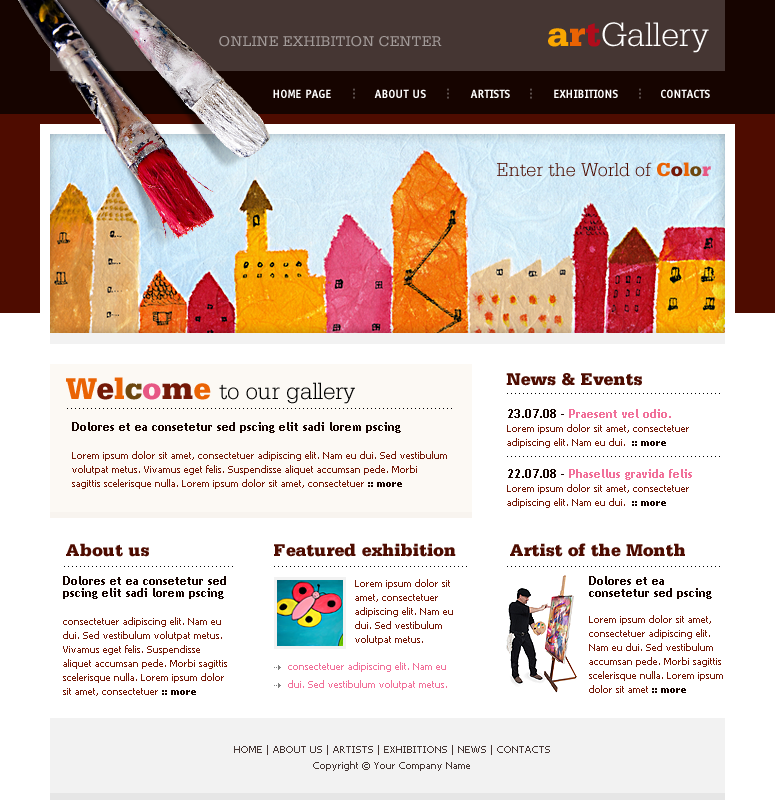
<style>
.page{position:relative;width:775px;height:800px;background:#ffffff}
.page>*{position:absolute;margin:0}
.t1{font:36px "SerifaStd-Light";color:#ffffff}
.t2{font:36px "SerifaStd-Black";color:#faa701}
.t3{font:36px "SerifaStd-Black";color:#ea6303}
.t4{font:36px "SerifaStd-Black";color:#b10c1b}
.t5{font:15px "SerifaStd-Roman";color:#a29b99;text-transform:uppercase}
.t6{font:12px "OffensiveBoldBold";color:#ffffff}
.t7{font:12px "OffensiveBoldBold";color:#5c504d}
.t8{font:19.9px "SerifaStd-Light";color:#4e0c00}
.t9{font:19.9px "SerifaStd-Black";color:#ea6303}
.t10{font:19.9px "SerifaStd-Black";color:#741907}
.t11{font:19.9px "SerifaStd-Black";color:#6d470f}
.t12{font:19.9px "SerifaStd-Black";color:#e75884}
.t13{font:24.7px "SerifaStd-Light";color:#000000}
.t14{font:31.7px "SerifaStd-Black";color:#ea6303}
.t15{font:31.7px "SerifaStd-Black";color:#741907}
.t16{font:31.7px "SerifaStd-Black";color:#6d470f}
.t17{font:31.7px "SerifaStd-Black";color:#e75884}
.t18{font:18px "SerifaStd-Black";color:#4e0c00}
.t19{font:10px "TrebuchetMS-Bold";color:#000000}
.t20{font:10px/14px "Tahoma";color:#741907}
.t21{font:12px/12px "TrebuchetMS-Bold";color:#160400}
.t22{font:12px/12px "TrebuchetMS-Bold";color:#f1719a}
.t23{font:10px/14px "Tahoma-Bold";color:#160400}
.t24{font:10px/18px "Tahoma";color:#f1719a}
.t25{font:10px/16px "Tahoma";color:#453633}
</style>
<div class="page">
<p class="t1" style="left:548px;top:22px;width:161px;height:31px"><span class="t2">a</span><span class="t3">r</span><span class="t4">t</span>Gallery</p>
<p class="t5" style="left:219px;top:36px;width:223px;height:11px">online exhibition center</p>
<p class="t6" style="left:273px;top:89px;width:58px;height:9px">HOME PAGE</p>
<p class="t7" style="left:353px;top:88px;width:2px;height:11px;rotate:90deg">...</p>
<p class="t6" style="left:374px;top:89px;width:52px;height:9px">ABOUT US</p>
<p class="t7" style="left:447px;top:88px;width:2px;height:11px;rotate:90deg">...</p>
<p class="t6" style="left:470px;top:89px;width:40px;height:9px">ARTISTS</p>
<p class="t7" style="left:530px;top:88px;width:2px;height:11px;rotate:90deg">...</p>
<p class="t6" style="left:554px;top:89px;width:64px;height:9px">EXHIBITIONS</p>
<p class="t7" style="left:639px;top:88px;width:2px;height:11px;rotate:90deg">...</p>
<p class="t6" style="left:661px;top:89px;width:49px;height:9px">CONTACTS</p>
<p class="t8" style="left:497px;top:162px;width:214px;height:15px">Enter the World of <span class="t9">C</span><span class="t10">o</span><span class="t9">l</span><span class="t11">o</span><span class="t12">r</span></p>
<p class="t13" style="left:66px;top:377px;width:289px;height:27px"><span class="t14">W</span><span class="t15">e</span><span class="t14">l</span><span class="t16">c</span><span class="t17">o</span><span class="t15">m</span><span class="t14">e </span>to our gallery</p>
<p class="t18" style="left:506px;top:373px;width:136px;height:13px">News &amp; Events</p>
<p class="t19" style="left:507px;top:393px;width:213px;height:1px">......................................................</p>
<p class="t19" style="left:67px;top:408px;width:385px;height:1px">.................................................................................................</p>
<p class="t20" style="left:507px;top:409px;width:182px;height:39px"><span class="t21">23.07.08 - </span><span class="t22">Praesent vel odio. <br></span>Lorem ipsum dolor sit amet, consectetuer adipiscing elit. Nam eu dui.  <span class="t23">:: more</span></p>
<p class="t20" style="left:72px;top:422px;width:375px;height:67px"><span class="t21">Dolores et ea consetetur sed pscing elit sadi lorem pscing <br></span><br>Lorem ipsum dolor sit amet, consectetuer adipiscing elit. Nam eu dui. Sed vestibulum volutpat metus. Vivamus eget felis. Suspendisse aliquet accumsan pede. Morbi sagittis scelerisque nulla. Lorem ipsum dolor sit amet, consectetuer <span class="t23">:: more</span></p>
<p class="t19" style="left:507px;top:456px;width:213px;height:1px">......................................................</p>
<p class="t20" style="left:507px;top:469px;width:185px;height:39px"><span class="t21">22.07.08 - </span><span class="t22">Phasellus gravida felis<br></span>Lorem ipsum dolor sit amet, consectetuer adipiscing elit. Nam eu dui.  <span class="t23">:: more</span></p>
<p class="t18" style="left:66px;top:543px;width:83px;height:14px">About us</p>
<p class="t18" style="left:274px;top:543px;width:182px;height:14px">Featured exhibition</p>
<p class="t18" style="left:510px;top:543px;width:175px;height:14px">Artist of the Month</p>
<p class="t19" style="left:64px;top:566px;width:169px;height:1px">...........................................</p>
<p class="t19" style="left:274px;top:566px;width:193px;height:1px">.................................................</p>
<p class="t19" style="left:507px;top:566px;width:213px;height:1px">......................................................</p>
<p class="t20" style="left:63px;top:576px;width:164px;height:120px"><span class="t21">Dolores et ea consetetur sed pscing elit sadi lorem pscing </span><br><br>consectetuer adipiscing elit. Nam eu dui. Sed vestibulum volutpat metus. Vivamus eget felis. Suspendisse aliquet accumsan pede. Morbi sagittis scelerisque nulla. Lorem ipsum dolor sit amet, consectetuer <span class="t23">:: more</span></p>
<p class="t20" style="left:355px;top:579px;width:98px;height:66px">Lorem ipsum dolor sit amet, consectetuer adipiscing elit. Nam eu dui. Sed vestibulum volutpat metus.</p>
<p class="t20" style="left:589px;top:576px;width:134px;height:117px"><span class="t21">Dolores et ea consetetur sed pscing <br><br></span>Lorem ipsum dolor sit amet, consectetuer adipiscing elit. Nam eu dui. Sed vestibulum accumsan pede. Morbi sagittis scelerisque nulla. Lorem ipsum dolor sit amet <span class="t23">:: more</span></p>
<p class="t24" style="left:288px;top:662px;width:159px;height:28px">consectetuer adipiscing elit. Nam eu dui. Sed vestibulum volutpat metus.</p>
<p class="t25" style="left:234px;top:745px;width:316px;height:26px;text-align:center">HOME | ABOUT US | ARTISTS | EXHIBITIONS | NEWS | CONTACTS<br>Copyright © Your Company Name</p>
</div>
